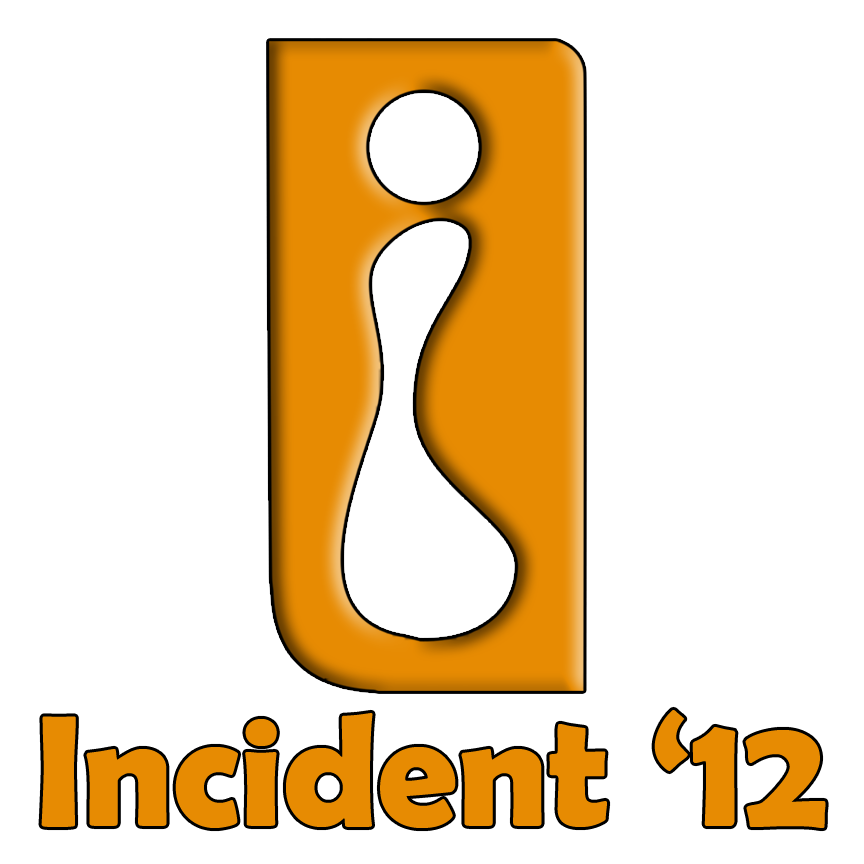
<style>
.page{position:relative;width:864px;height:864px;background:#ffffff}
.page>*{position:absolute;margin:0}
.t1{font:159.6px "BerlinSansFBDemi-Bold";color:#ff7e00}
</style>
<div class="page">
<p class="t1" style="left:41px;top:710px;width:785px;height:118px">Incident ‘12</p>
</div>
